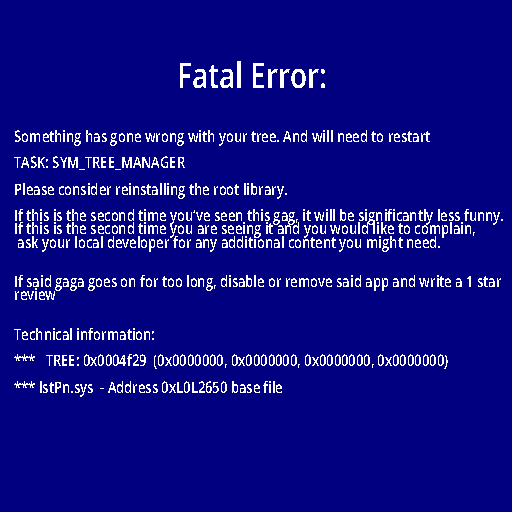
<style>
.page{position:relative;width:512px;height:512px;background:#000080}
.page>*{position:absolute;margin:0}
.t1{font:35.3px "OpenSans-Semibold";color:#ffffff;scale:0.78 1}
.t2{font:35.3px "OpenSans-Semibold";color:#000080;scale:0.78 1}
.t3{font:16.2px "OpenSans-Semibold";color:#ffffff;scale:0.78 1}
</style>
<div class="page">
<p class="t1" style="left:162px;top:61px;width:163px;height:27px"><span class="t2">x</span>Fatal Error:</p>
<p class="t3" style="left:14px;top:130px;width:489px;height:267px">Something has gone wrong with your tree. And will need to restart<br><br>TASK: SYM_TREE_MANAGER <br><br>Please consider reinstalling the root library.<br><br>If this is the second time you’ve seen this gag, it will be significantly less funny. <br>If this is the second time you are seeing it and you would like to complain,<br> ask your local developer for any additional content you might need.<br><br><br>If said gaga goes on for too long, disable or remove said app and write a 1 star <br>review  <br><br><br>Technical information:<br><br>***   TREE: 0x0004f29  (0x0000000, 0x0000000, 0x0000000, 0x0000000) <br><br>*** lstPn.sys  - Address 0xL0L2650 base file</p>
</div>
